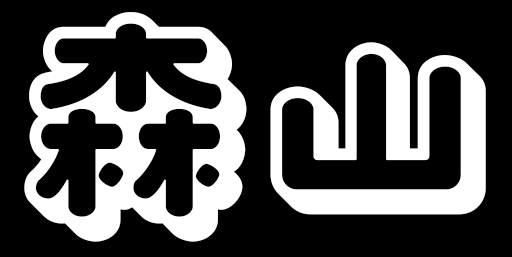
<style>
.page{position:relative;width:512px;height:257px;background:#000000}
.page>*{position:absolute;margin:0}
.t1{font:234.9px "VDL-MegaMaru-pop-Shadow";color:#ffffff;font-weight:bold}
</style>
<div class="page">
<p class="t1" style="left:24px;top:12px;width:462px;height:230px">森山</p>
</div>
